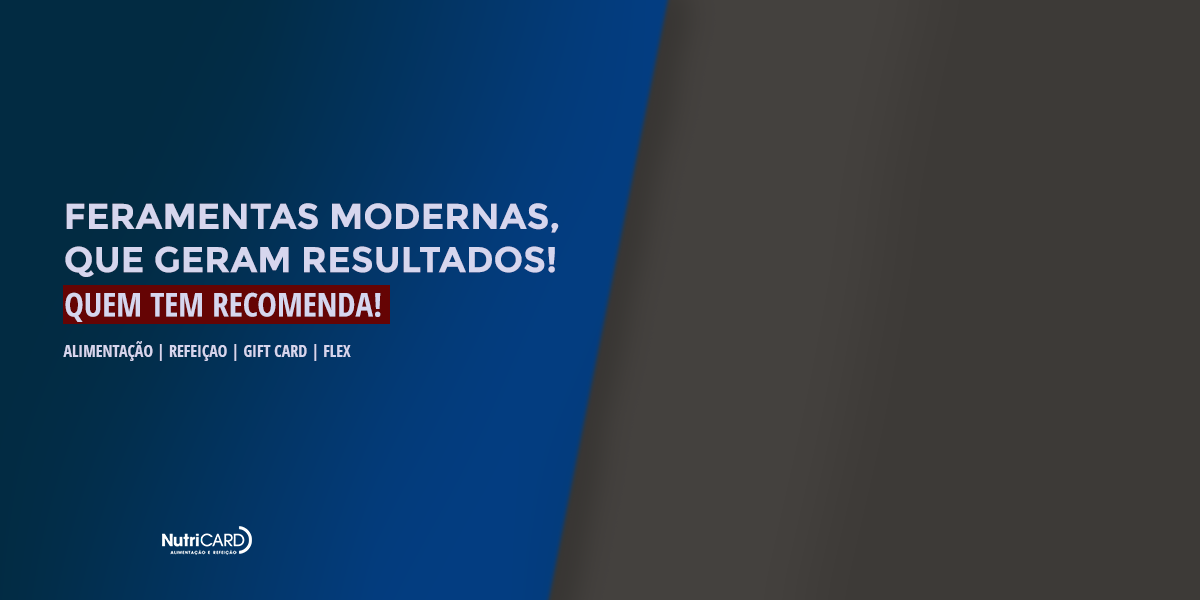
<style>
.page{position:relative;width:1200px;height:600px;background:#3d3a37}
.page>*{position:absolute;margin:0}
.t1{font:36px "Montserrat-Bold";color:#d6d6ee;text-transform:uppercase}
.t2{font:32.9px "OpenSansCondensed-Bold";color:#d6d6ee;text-transform:uppercase}
.t3{font:32.9px "Montserrat-Bold";color:#d6d6ee;text-transform:uppercase}
.t4{font:16px "OpenSansCondensed-Bold";color:#d6d6ee;text-transform:uppercase}
</style>
<div class="page">
<p class="t1" style="left:65px;top:203px;width:494px;height:74px">feramentas modernas,<br>que geram resultados!</p>
<p class="t2" style="left:65px;top:292px;width:316px;height:30px"><span class="t3"><br></span>quem tem recomenda!</p>
<p class="t4" style="left:63px;top:341px;width:288px;height:20px">Alimentação | refeiçao | gift card | flex</p>
</div>
